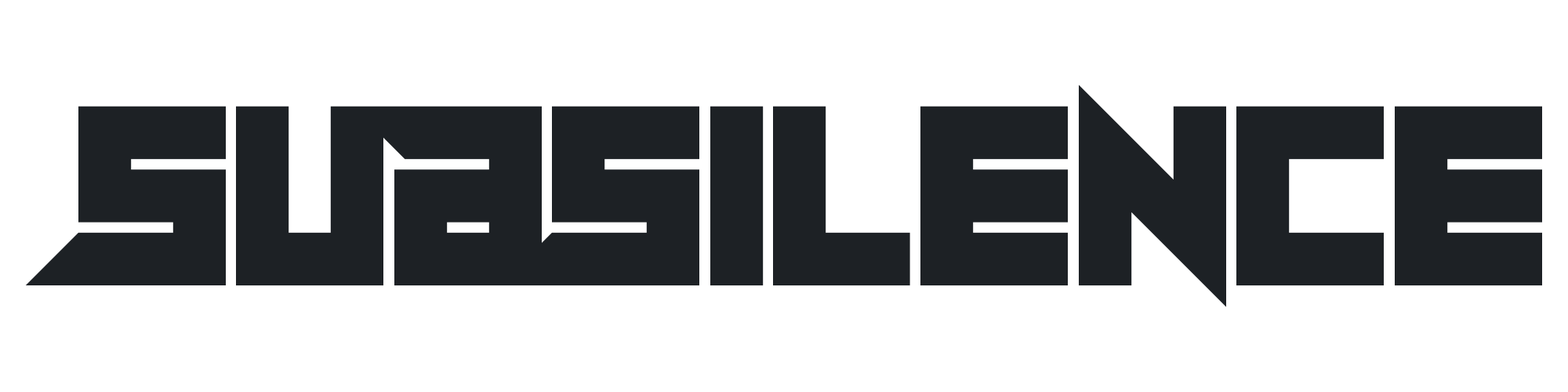
<style>
.page{position:relative;width:1568px;height:392px;background:#ffffff}
.page>*{position:absolute;margin:0}
.t1{font:215.6px "SheepingCatsStraight";color:#1d2125}
</style>
<div class="page">
<p class="t1" style="left:25px;top:85px;width:1517px;height:222px">SubSilence</p>
</div>
